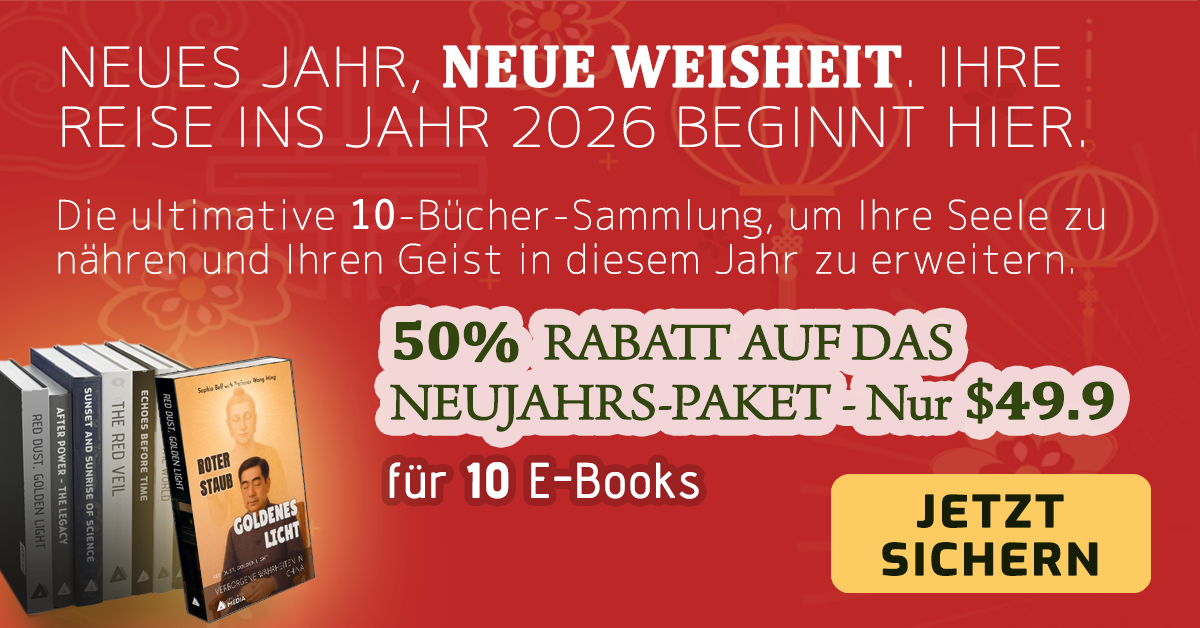
<style>
.page{position:relative;width:1200px;height:628px;background:#bd2728}
.page>*{position:absolute;margin:0}
.t1{font:54px/60px "Chogokuboso-Gothic";letter-spacing:-0.005em;color:#ffffff;font-weight:bold;scale:1.11 1}
.t2{font:60px/60px "Cambria-Bold";letter-spacing:-0.005em;color:#ffffff;font-weight:bold}
.t3{font:39.6px/44px "Chogokuboso-Gothic";letter-spacing:0.025em;color:#ffffff;font-weight:bold}
.t4{font:39.6px/44px "YuGothic-Regular";letter-spacing:0.025em;color:#ffffff;font-weight:bold}
.t5{font:54px/60px "ArnoPro-LightDisplay";letter-spacing:-0.025em;color:#31460c;font-weight:bold;scale:1.11 1}
.t6{font:54px/60px "Cambria-Bold";letter-spacing:-0.025em;color:#31460c;font-weight:bold;scale:1.11 1}
.t7{font:54px/60px "Cambria";letter-spacing:-0.025em;color:#31460c;font-weight:bold;scale:1.11 1}
.t8{font:48px "AdventPro-Regular";letter-spacing:0.05em;color:#ffffff;font-weight:bold}
.t9{font:48px "AdventPro-Bold";letter-spacing:0.05em;color:#ffffff;font-weight:bold}
.t10{font:43.2px/48px "Exo-Bold";letter-spacing:0.05em;color:#151e05;font-weight:bold;scale:1.11 1}
</style>
<div class="page">
<p class="t1" style="left:62px;top:45px;width:1022px;height:103px">NEUES JAHR, <span class="t2">NEUE WEISHEIT</span>. IHRE REISE INS JAHR 2026 BEGINNT HIER.</p>
<p class="t3" style="left:58px;top:198px;width:1046px;height:76px">Die ultimative <span class="t4">10</span>-Bücher-Sammlung, um Ihre Seele zu nähren und Ihren Geist in diesem Jahr zu erweitern.</p>
<p class="t5" style="left:390px;top:320px;width:724px;height:112px"><span class="t6">50% </span> RABATT AUF DAS NEUJAHRS-PAKET - Nur<span class="t7"> $</span><span class="t6">49.9</span></p>
<p class="t8" style="left:389px;top:462px;width:310px;height:37px">für <span class="t9">10</span> E-Books</p>
<p class="t10" style="left:882px;top:494px;width:216px;height:82px;text-align:center">JETZT SICHERN</p>
</div>
